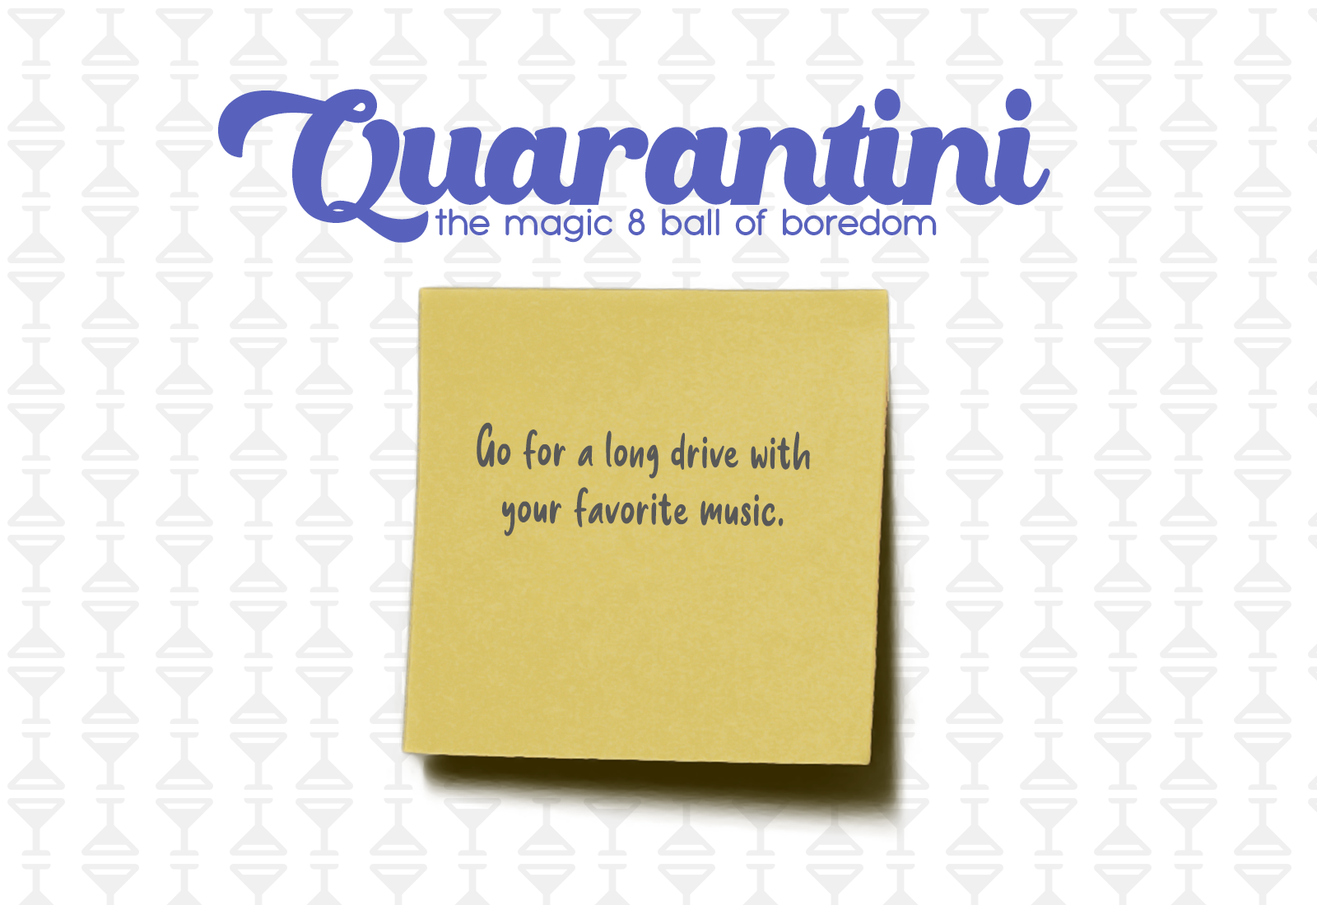
<style>
.page{position:relative;width:1317px;height:905px;background:#ffffff}
.page>*{position:absolute;margin:0}
.t1{font:154.3px "Oaklash";letter-spacing:-0.05em;color:#5862bd;scale:0.8 1}
.t2{font:36.2px "TypoGroteskRounded";color:#5862bd}
.t3{font:59.7px "sweetpurple";letter-spacing:0.01em;color:#585858;scale:0.8 1}
</style>
<div class="page">
<p class="t1" style="left:218px;top:88px;width:832px;height:155px">Quarantini</p>
<p class="t2" style="left:435px;top:208px;width:502px;height:35px">the magic 8 ball of boredom</p>
<p class="t3" style="left:477px;top:422px;width:333px;height:115px;rotate:1deg">Go for a long drive with your favorite music.</p>
</div>
